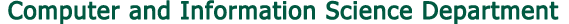
<style>
.page{position:relative;width:569px;height:24px;background:#ffffff}
.page>*{position:absolute;margin:0}
.t1{font:24px "Tahoma";letter-spacing:0.02em;color:#005941;font-weight:bold}
</style>
<div class="page">
<p class="t1" style="left:8px;top:0px;width:551px;height:24px">Computer and Information Science Department</p>
</div>
